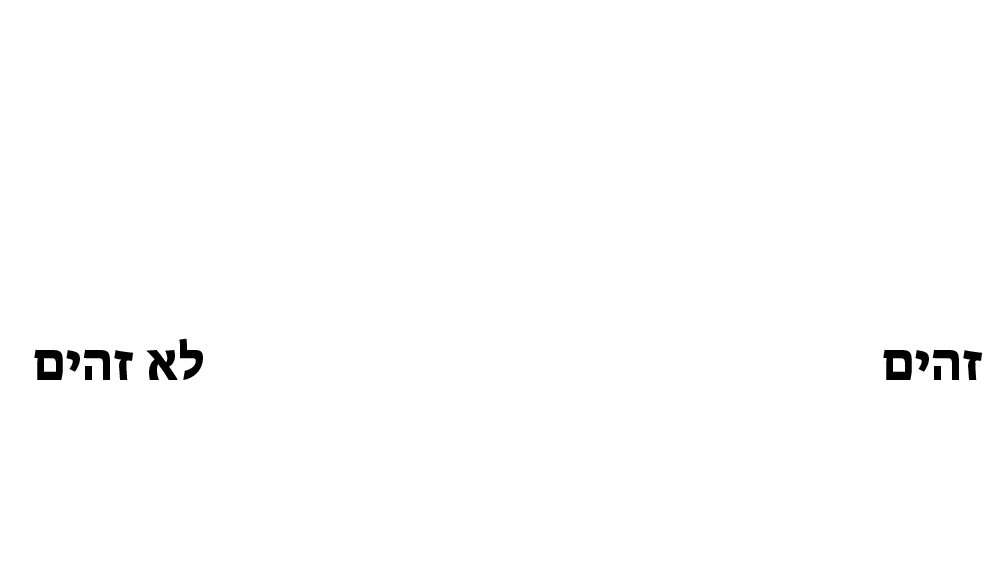
<style>
.page{position:relative;width:1000px;height:563px;background:#ffffff}
.page>*{position:absolute;margin:0}
.t1{font:53.3px "MyriadHebrew-Bold";color:#000000}
</style>
<div class="page">
<p class="t1" style="left:34px;top:338px;width:169px;height:42px">לא זהים</p>
<p class="t1" style="left:883px;top:349px;width:100px;height:31px">זהים</p>
</div>
